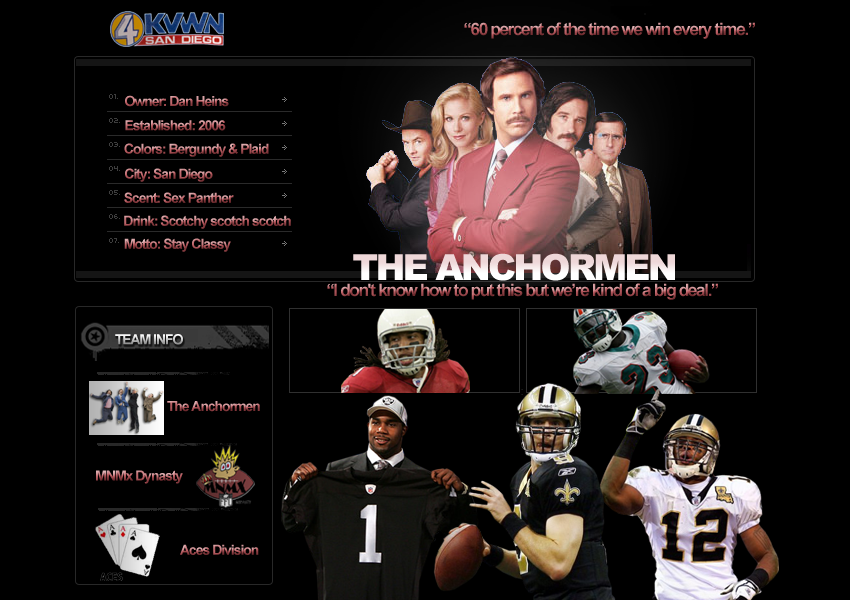
<style>
.page{position:relative;width:850px;height:600px;background:#000000}
.page>*{position:absolute;margin:0}
.t1{font:17px "Arial-BoldMT";letter-spacing:-0.075em}
.t2{font:14px "Arial-BoldMT";letter-spacing:-0.075em}
.t3{font:36px "Arial-Black";letter-spacing:-0.075em;color:#f6ebeb}
</style>
<div class="page">
<p class="t1" style="left:464px;top:22px;width:291px;height:17px">“60 percent of the time we win every time.”</p>
<p class="t2" style="left:125px;top:95px;width:104px;height:12px">Owner: Dan Heins</p>
<p class="t2" style="left:125px;top:120px;width:101px;height:11px">Established: 2006</p>
<p class="t2" style="left:124px;top:143px;width:145px;height:14px">Colors: Bergundy &amp; Plaid</p>
<p class="t2" style="left:125px;top:168px;width:88px;height:14px">City: San Diego</p>
<p class="t2" style="left:124px;top:192px;width:110px;height:11px">Scent: Sex Panther</p>
<p class="t2" style="left:124px;top:215px;width:167px;height:14px">Drink: Scotchy scotch scotch</p>
<p class="t2" style="left:124px;top:238px;width:107px;height:14px">Motto: Stay Classy</p>
<p class="t3" style="left:353px;top:253px;width:322px;height:28px">THE ANCHORMEN</p>
<p class="t1" style="left:327px;top:283px;width:391px;height:17px">“I don't know how to put this but we’re kind of a big deal.”</p>
<p class="t2" style="left:115px;top:334px;width:68px;height:11px">TEAM INFO</p>
<p class="t2" style="left:167px;top:401px;width:93px;height:11px">The Anchormen</p>
<p class="t2" style="left:96px;top:470px;width:87px;height:14px">MNMx Dynasty</p>
<p class="t2" style="left:180px;top:544px;width:79px;height:11px">Aces Division</p>
</div>
